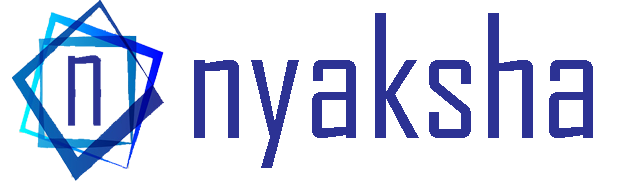
<style>
.page{position:relative;width:631px;height:181px;background:#ffffff}
.page>*{position:absolute;margin:0}
.t1{font:164px "AgencyFB-Reg";color:#2c3294}
</style>
<div class="page">
<p class="t1" style="left:194px;top:13px;width:399px;height:155px">nyaksha</p>
</div>
